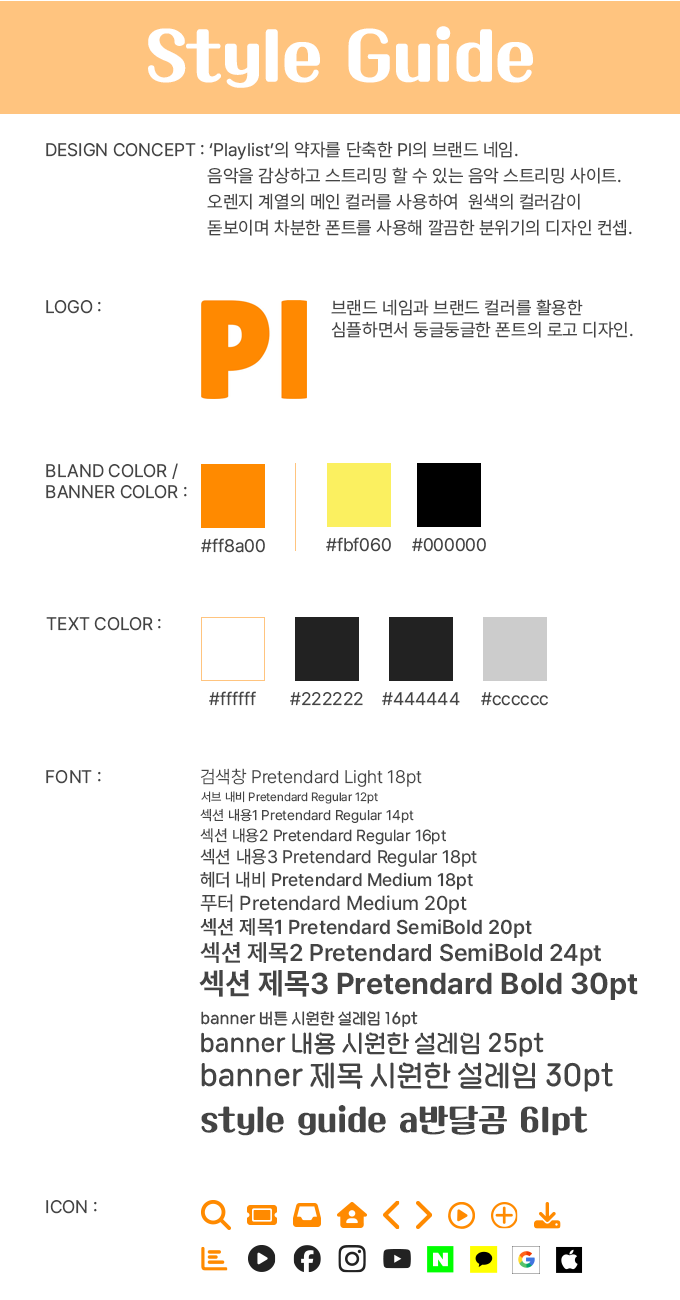
<style>
.page{position:relative;width:680px;height:1300px;background:#ffffff}
.page>*{position:absolute;margin:0}
.t1{font:61px "KoreanBDG-R";color:#ffffff}
.t2{font:18px/26px "Pretendard-Regular";color:#444444}
.t3{font:18px "Pretendard-Regular";color:#444444}
.t4{font:18px "Pretendard-Light";color:#444444}
.t5{font:12px "Pretendard-Regular";color:#444444}
.t6{font:14px "Pretendard-Regular";color:#444444}
.t7{font:16px "Pretendard-Regular";color:#444444}
.t8{font:18px "Pretendard-Medium";color:#444444}
.t9{font:20px "Pretendard-Medium";color:#444444}
.t10{font:20px "Pretendard-SemiBold";color:#444444}
.t11{font:24px "Pretendard-SemiBold";color:#444444}
.t12{font:30px "Pretendard-Bold";color:#444444}
.t13{font:16px "seolleimcool-SemiBold";color:#444444}
.t14{font:25px "seolleimcool-SemiBold";color:#444444}
.t15{font:30px "seolleimcool-SemiBold";color:#444444}
.t16{font:30px "KoreanBDG-R";color:#444444}
</style>
<div class="page">
<p class="t1" style="left:148px;top:26px;width:385px;height:62px">Style Guide</p>
<p class="t2" style="left:46px;top:141px;width:586px;height:95px"><span class="t3">DESIGN CONCEPT : </span>‘Playlist’의 약자를 단축한 Pl의 브랜드 네임.<br>                                    음악을 감상하고 스트리밍 할 수 있는 음악 스트리밍 사이트.<br>                                    오렌지 계열의 메인 컬러를 사용하여  원색의 컬러감이<br>                                    돋보이며 차분한 폰트를 사용해 깔끔한 분위기의 디자인 컨셉..</p>
<p class="t3" style="left:46px;top:300px;width:55px;height:14px">LOGO :</p>
<p class="t3" style="left:331px;top:299px;width:302px;height:39px">브랜드 네임과 브랜드 컬러를 활용한<br>심플하면서 둥글둥글한 폰트의 로고 디자인.</p>
<p class="t3" style="left:46px;top:463px;width:141px;height:36px">BLAND COLOR /<br>BANNER COLOR :</p>
<p class="t3" style="left:201px;top:538px;width:64px;height:15px">#ff8a00</p>
<p class="t3" style="left:326px;top:537px;width:65px;height:15px">#fbf060</p>
<p class="t3" style="left:412px;top:538px;width:74px;height:14px">#000000</p>
<p class="t3" style="left:46px;top:617px;width:115px;height:14px">TEXT COLOR :</p>
<p class="t3" style="left:209px;top:691px;width:47px;height:15px">#ffffff</p>
<p class="t3" style="left:290px;top:692px;width:73px;height:14px">#222222</p>
<p class="t3" style="left:382px;top:692px;width:78px;height:14px">#444444</p>
<p class="t3" style="left:481px;top:692px;width:67px;height:14px">#cccccc</p>
<p class="t3" style="left:46px;top:770px;width:55px;height:14px">FONT :</p>
<p class="t4" style="left:200px;top:768px;width:222px;height:19px">검색창 Pretendard Light 18pt</p>
<p class="t5" style="left:201px;top:791px;width:177px;height:13px">서브 내비 Pretendard Regular 12pt</p>
<p class="t6" style="left:200px;top:808px;width:214px;height:15px">섹션 내용1 Pretendard Regular 14pt</p>
<p class="t7" style="left:200px;top:828px;width:246px;height:17px">섹션 내용2 Pretendard Regular 16pt</p>
<p class="t3" style="left:200px;top:848px;width:277px;height:19px">섹션 내용3 Pretendard Regular 18pt</p>
<p class="t8" style="left:200px;top:871px;width:273px;height:19px">헤더 내비 Pretendard Medium 18pt</p>
<p class="t9" style="left:200px;top:894px;width:267px;height:20px">푸터 Pretendard Medium 20pt</p>
<p class="t10" style="left:200px;top:918px;width:332px;height:20px">섹션 제목1 Pretendard SemiBold 20pt</p>
<p class="t11" style="left:200px;top:942px;width:401px;height:24px">섹션 제목2 Pretendard SemiBold 24pt</p>
<p class="t12" style="left:199px;top:970px;width:439px;height:30px">섹션 제목3 Pretendard Bold 30pt</p>
<p class="t13" style="left:201px;top:1011px;width:217px;height:16px">banner 버튼 시원한 설레임 16pt</p>
<p class="t14" style="left:201px;top:1032px;width:343px;height:25px">banner 내용 시원한 설레임 25pt</p>
<p class="t15" style="left:201px;top:1062px;width:412px;height:30px">banner 제목 시원한 설레임 30pt</p>
<p class="t16" style="left:201px;top:1105px;width:387px;height:31px">style guide a반달곰 61pt</p>
<p class="t3" style="left:46px;top:1200px;width:51px;height:14px">ICON :</p>
</div>
